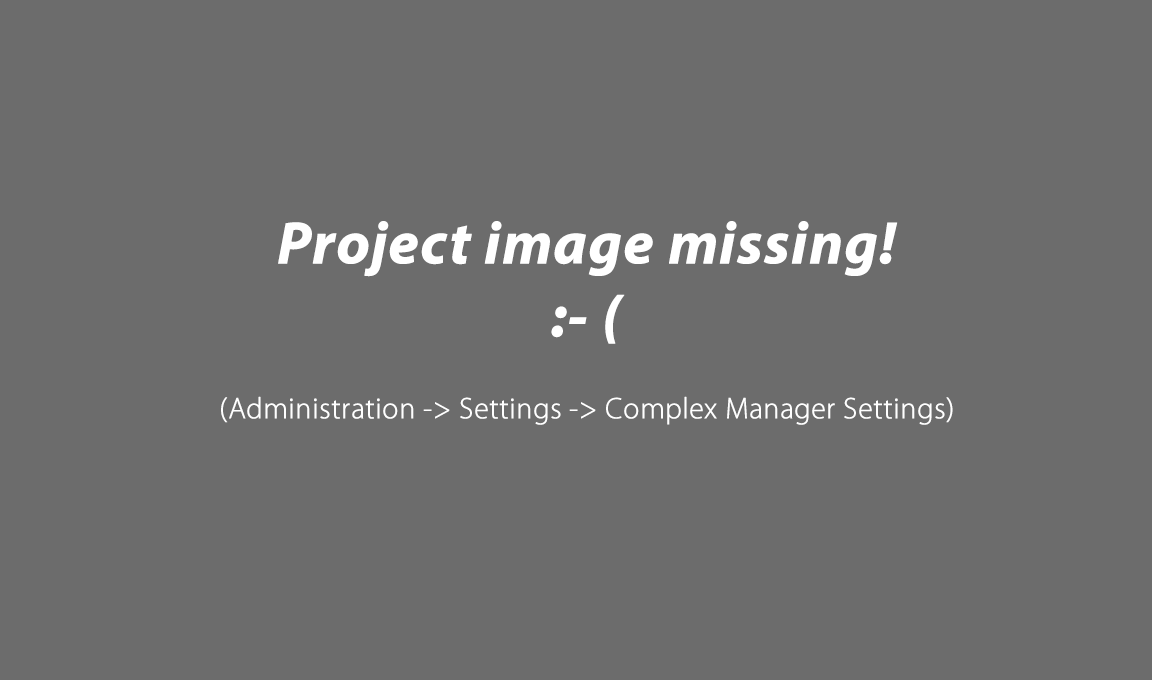
<style>
.page{position:relative;width:1152px;height:680px;background:#6c6c6c}
.page>*{position:absolute;margin:0}
.t1{font:60px "MyriadPro-BoldIt";color:#ffffff;font-weight:bold}
.t2{font:30px "MyriadPro-Light";color:#ffffff;font-weight:bold}
</style>
<div class="page">
<p class="t1" style="left:278px;top:221px;width:620px;height:56px">Project image missing!</p>
<p class="t1" style="left:551px;top:294px;width:74px;height:50px">:- (</p>
<p class="t2" style="left:221px;top:396px;width:732px;height:29px">(Administration -&gt; Settings -&gt; Complex Manager Settings)</p>
</div>
